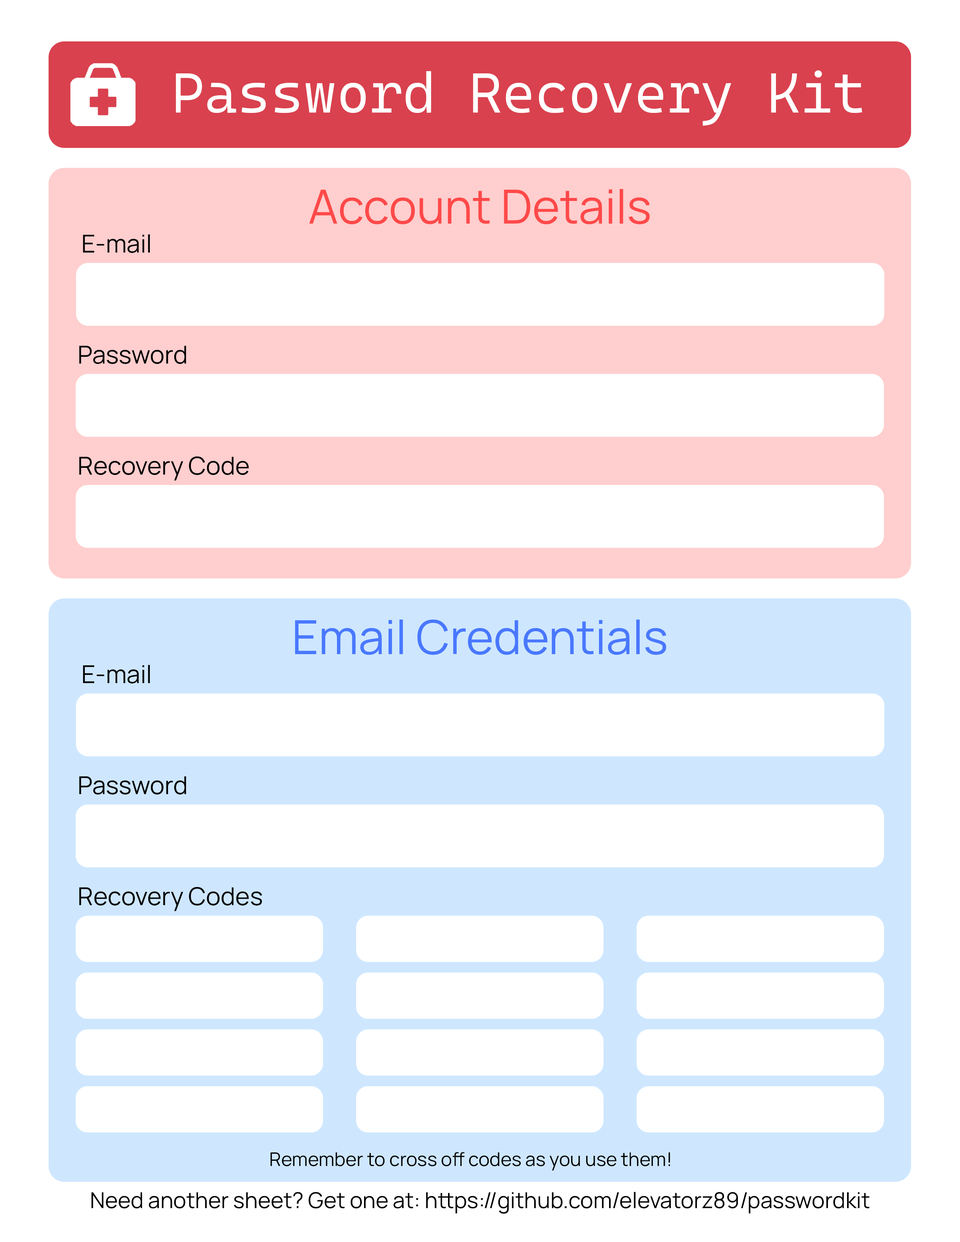
<style>
.page{position:relative;width:960px;height:1242px;background:#ffffff}
.page>*{position:absolute;margin:0}
.t1{font:56.5px "CascadiaMonoRoman-SemiLight";color:#ffffff}
.t2{font:47.1px "Manrope-Regular";color:#ff4949}
.t3{font:24.7px "Manrope-Regular";color:#000000}
.t4{font:47.1px "Manrope-Regular";color:#4978ff}
.t5{font:18.8px "Manrope-Regular";color:#000000}
.t6{font:22px "Manrope-Regular";color:#000000}
</style>
<div class="page">
<p class="t1" style="left:176px;top:70px;width:686px;height:56px">Password Recovery Kit</p>
<p class="t2" style="left:309px;top:189px;width:341px;height:35px">Account Details</p>
<p class="t3" style="left:83px;top:234px;width:67px;height:19px">E-mail</p>
<p class="t3" style="left:79px;top:346px;width:107px;height:18px">Password</p>
<p class="t3" style="left:79px;top:456px;width:170px;height:25px">Recovery Code</p>
<p class="t4" style="left:295px;top:620px;width:371px;height:35px">Email Credentials</p>
<p class="t3" style="left:83px;top:665px;width:67px;height:19px">E-mail</p>
<p class="t3" style="left:79px;top:776px;width:107px;height:19px">Password</p>
<p class="t3" style="left:79px;top:887px;width:183px;height:24px">Recovery Codes</p>
<p class="t5" style="left:270px;top:1152px;width:400px;height:19px">Remember to cross off codes as you use them!</p>
<p class="t6" style="left:91px;top:1192px;width:779px;height:22px">Need another sheet? Get one at: https://github.com/elevatorz89/passwordkit</p>
</div>
